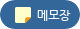
<style>
.page{position:relative;width:80px;height:29px;background:#336699}
.page>*{position:absolute;margin:0}
.t1{font:12px "NanumGothic";color:#ffffff}
</style>
<div class="page">
<p class="t1" style="left:37px;top:10px;width:34px;height:11px">메모장</p>
</div>
